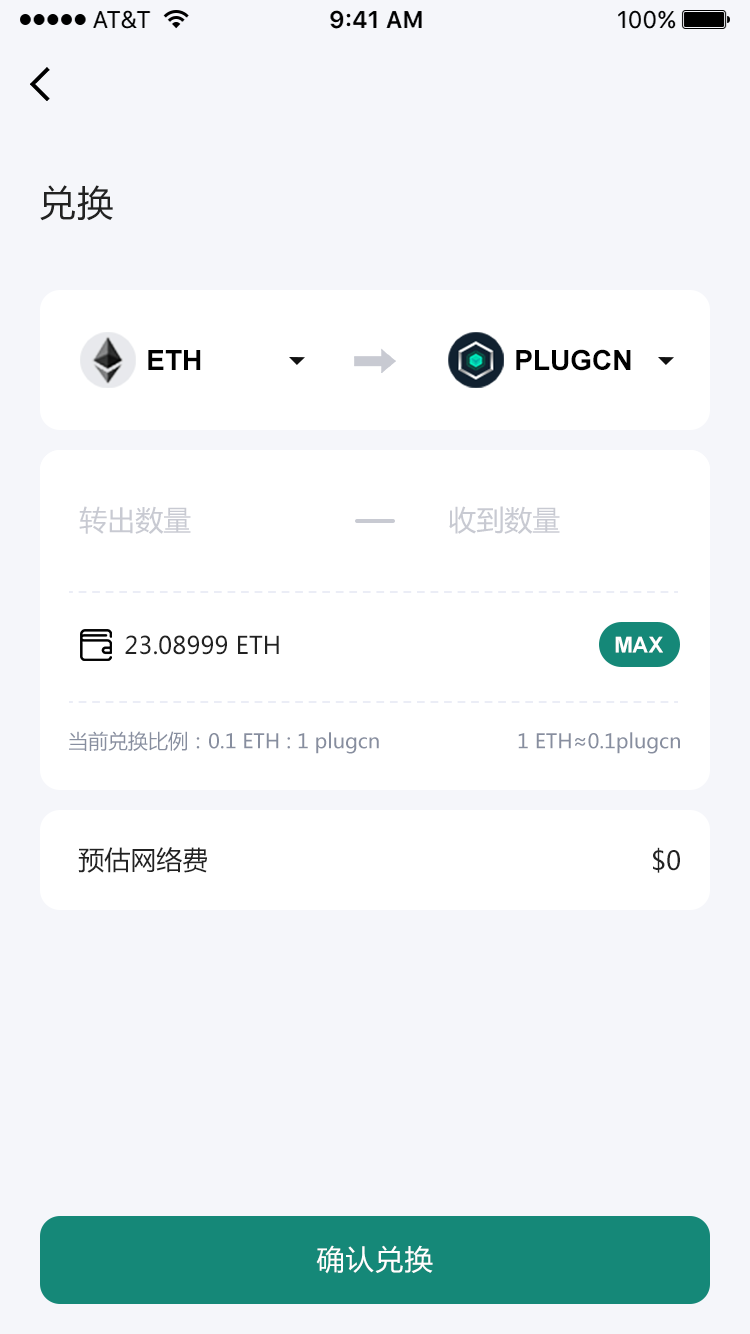
<style>
.page{position:relative;width:750px;height:1334px;background:#f5f6fa}
.page>*{position:absolute;margin:0}
.t1{font:36px "MicrosoftYaHei";letter-spacing:0.05em;color:#222222}
.t2{font:28px "Arial-BoldMT";color:#000000}
.t3{font:28px "MicrosoftYaHei";color:#c8cad2}
.t4{font:24px "MicrosoftYaHei";color:#222222}
.t5{font:22px "Arial-BoldMT";color:#ffffff}
.t6{font:20px "MicrosoftYaHei";color:#878e9f}
.t7{font:26px "MicrosoftYaHei";color:#222222}
.t8{font:28px "MicrosoftYaHei";letter-spacing:0.05em;color:#ffffff}
</style>
<div class="page">
<p class="t1" style="left:40px;top:185px;width:73px;height:36px">兑换</p>
<p class="t2" style="left:148px;top:350px;width:53px;height:20px">ETH</p>
<p class="t2" style="left:516px;top:349px;width:115px;height:22px">PLUGCN</p>
<p class="t3" style="left:79px;top:506px;width:112px;height:28px">转出数量</p>
<p class="t3" style="left:449px;top:506px;width:111px;height:28px">收到数量</p>
<p class="t4" style="left:125px;top:635px;width:154px;height:20px">23.08999 ETH</p>
<p class="t5" style="left:615px;top:636px;width:48px;height:17px">MAX</p>
<p class="t6" style="left:69px;top:731px;width:310px;height:23px">当前兑换比例：0.1 ETH : 1 plugcn</p>
<p class="t6" style="left:518px;top:732px;width:162px;height:22px">1 ETH≈0.1plugcn</p>
<p class="t7" style="left:78px;top:847px;width:129px;height:26px">预估网络费</p>
<p class="t7" style="left:653px;top:847px;width:27px;height:26px">$0</p>
<p class="t8" style="left:316px;top:1245px;width:117px;height:29px">确认兑换</p>
</div>
